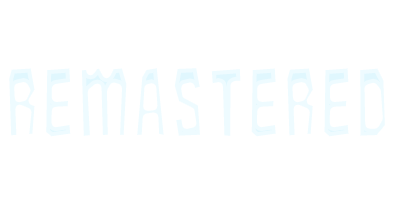
<style>
.page{position:relative;width:400px;height:200px;background:#ffffff}
.page>*{position:absolute;margin:0}
.t1{font:91.1px "Kaiju-Monster__G";color:#fcfeff}
</style>
<div class="page">
<p class="t1" style="left:5px;top:63px;width:384px;height:78px">Remastered</p>
</div>
